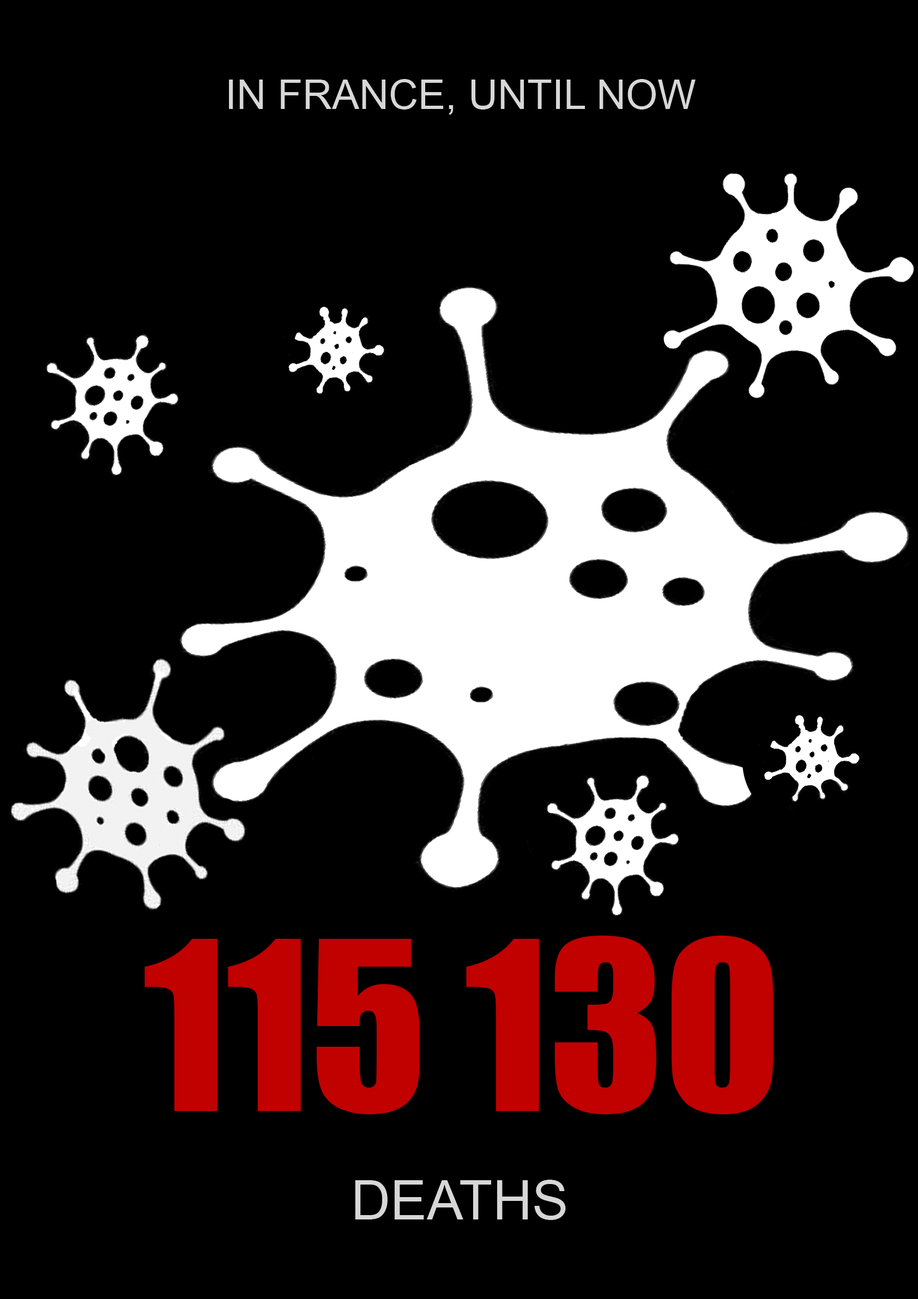
<style>
.page{position:relative;width:918px;height:1299px;background:#000000}
.page>*{position:absolute;margin:0}
.t1{font:40.9px "ArialMT";color:#d7d7d7}
.t2{font:218px "Impact";color:#c10000}
.t3{font:54.5px "ArialMT";color:#d7d7d7}
</style>
<div class="page">
<p class="t1" style="left:229px;top:79px;width:466px;height:36px">IN FRANCE, UNTIL NOW</p>
<p class="t2" style="left:144px;top:936px;width:629px;height:179px">115 130</p>
<p class="t3" style="left:355px;top:1180px;width:211px;height:40px">DEATHS</p>
</div>
